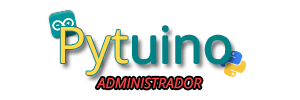
<style>
.page{position:relative;width:300px;height:100px;background:#ffffff}
.page>*{position:absolute;margin:0}
.t1{font:50px "OpenSans-Regular";color:#ffd948}
.t2{font:50px "OpenSans-Regular";color:#008184}
.t3{font:14px "OpenSans-Italic";color:#ff4848}
</style>
<div class="page">
<p class="t1" style="left:60px;top:27px;width:68px;height:48px">Pyt</p>
<p class="t2" style="left:133px;top:26px;width:98px;height:38px">uino</p>
<p class="t3" style="left:96px;top:77px;width:106px;height:12px">ADMINISTRADOR</p>
</div>
